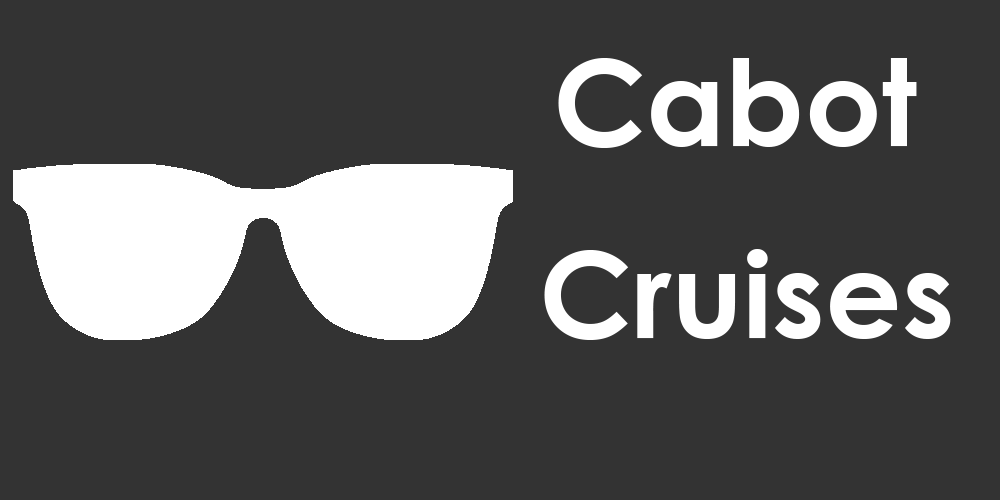
<style>
.page{position:relative;width:1000px;height:500px;background:#333333}
.page>*{position:absolute;margin:0}
.t1{font:120px "CenturyGothic-Bold";color:#ffffff}
</style>
<div class="page">
<p class="t1" style="left:558px;top:58px;width:359px;height:90px">Cabot</p>
<p class="t1" style="left:544px;top:249px;width:407px;height:91px">Cruises</p>
</div>
